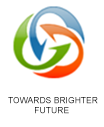
<style>
.page{position:relative;width:104px;height:127px;background:#ffffff}
.page>*{position:absolute;margin:0}
.t1{font:8.4px "ArialMT"}
</style>
<div class="page">
<p class="t1" style="left:8px;top:97px;width:90px;height:17px">TOWARDS BRIGHTER<br>              FUTURE</p>
</div>
